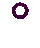
<style>
.page{position:relative;width:40px;height:48px;background:#ffffff}
.page>*{position:absolute;margin:0}
.t1{font:66.7px "Tuffy";color:#40033a}
</style>
<div class="page">
<p class="t1" style="left:12px;top:2px;width:17px;height:17px">°</p>
</div>
